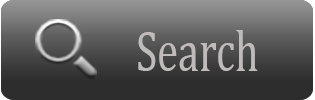
<style>
.page{position:relative;width:315px;height:100px}
.page>*{position:absolute;margin:0}
.t1{font:58.3px "Cambria";color:#bfbbbb;scale:0.73 1}
</style>
<div class="page">
<p class="t1" style="left:138px;top:30px;width:120px;height:41px">Search</p>
</div>
